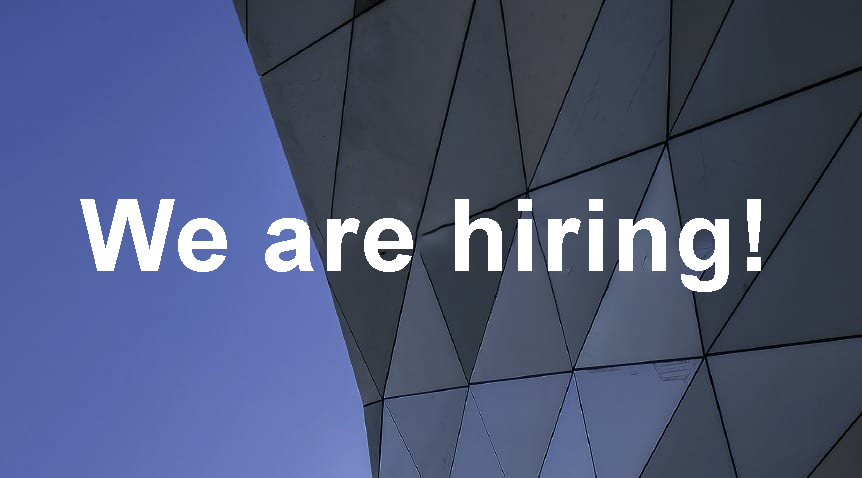
<style>
.page{position:relative;width:862px;height:478px}
.page>*{position:absolute;margin:0}
.t1{font:100px "Arial-BoldMT";letter-spacing:0.02em;color:#ffffff}
</style>
<div class="page">
<p class="t1" style="left:80px;top:199px;width:681px;height:93px">We are hiring!</p>
</div>
